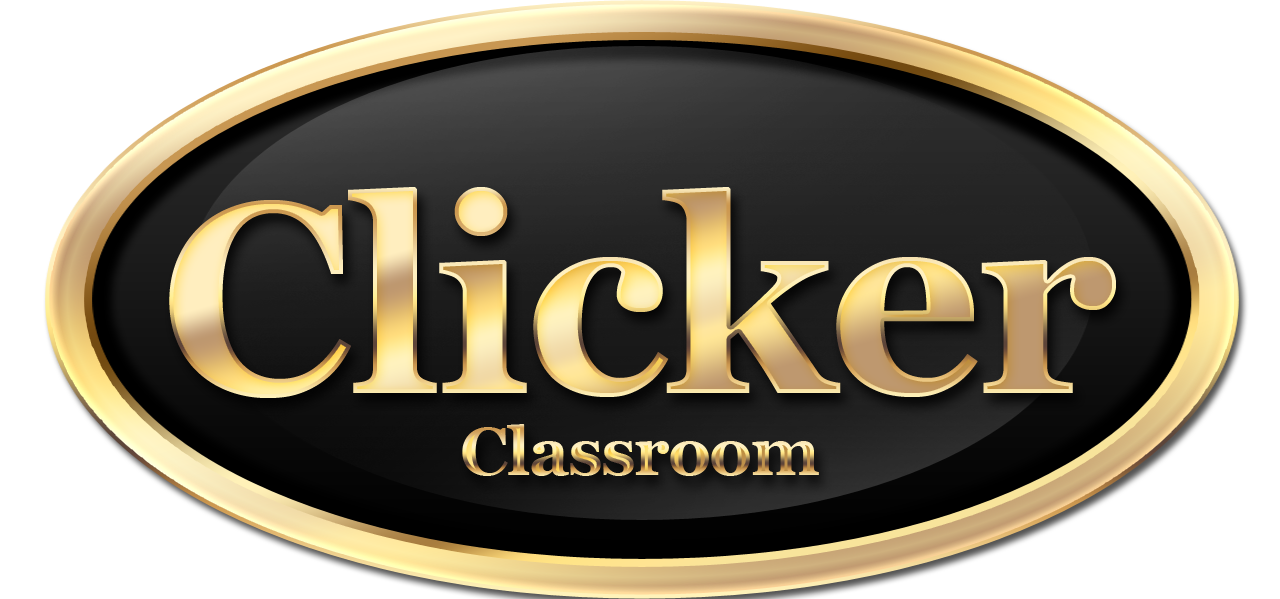
<style>
.page{position:relative;width:1280px;height:599px;background:#ffffff}
.page>*{position:absolute;margin:0}
.t1{font:272px "Georgia-Bold";letter-spacing:-0.025em}
.t2{font:68px "Georgia-Bold";letter-spacing:-0.025em}
</style>
<div class="page">
<p class="t1" style="left:169px;top:187px;width:947px;height:211px">Clicker</p>
<p class="t2" style="left:462px;top:424px;width:357px;height:52px">Classroom</p>
</div>
